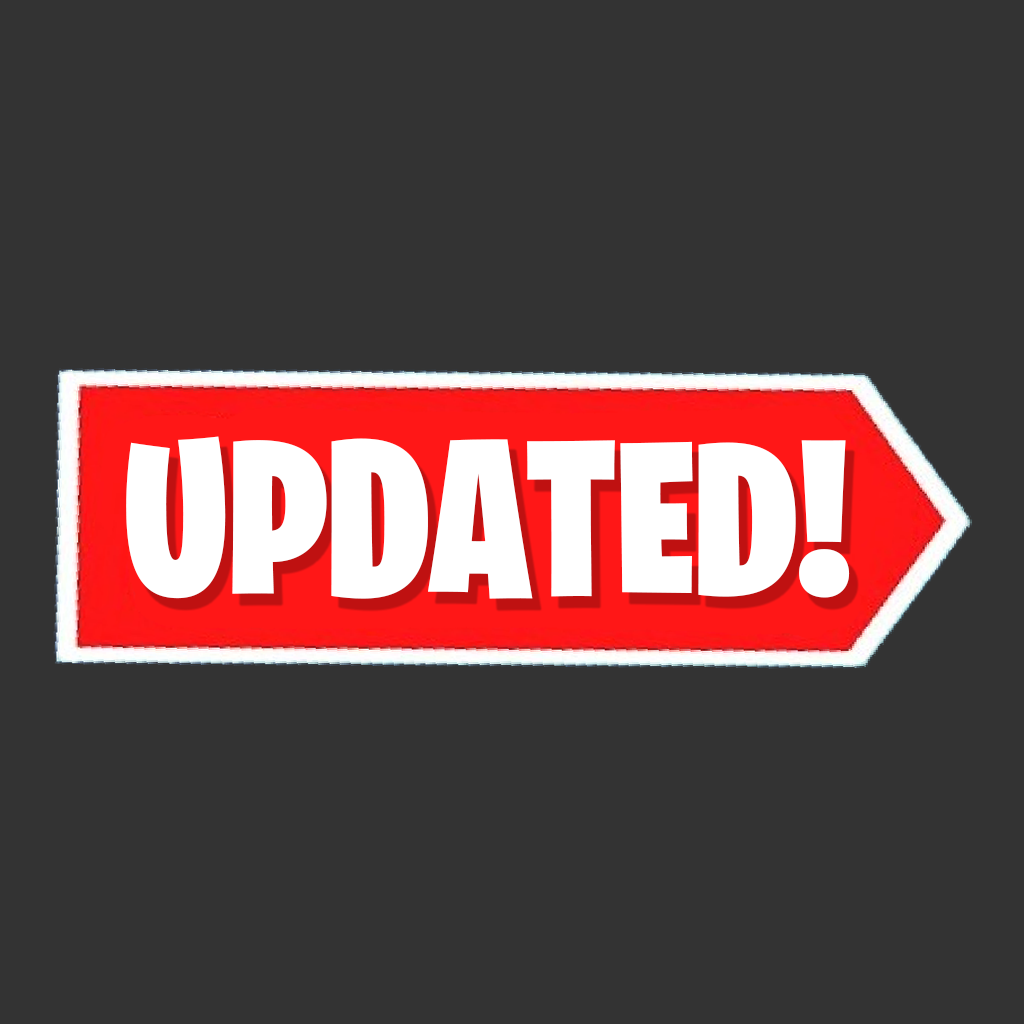
<style>
.page{position:relative;width:1024px;height:1024px;background:#333333}
.page>*{position:absolute;margin:0}
.t1{font:221.5px "BurbankBigCondensed-Black";color:#ffffff}
</style>
<div class="page">
<p class="t1" style="left:126px;top:436px;width:724px;height:163px">UPDATED!</p>
</div>
